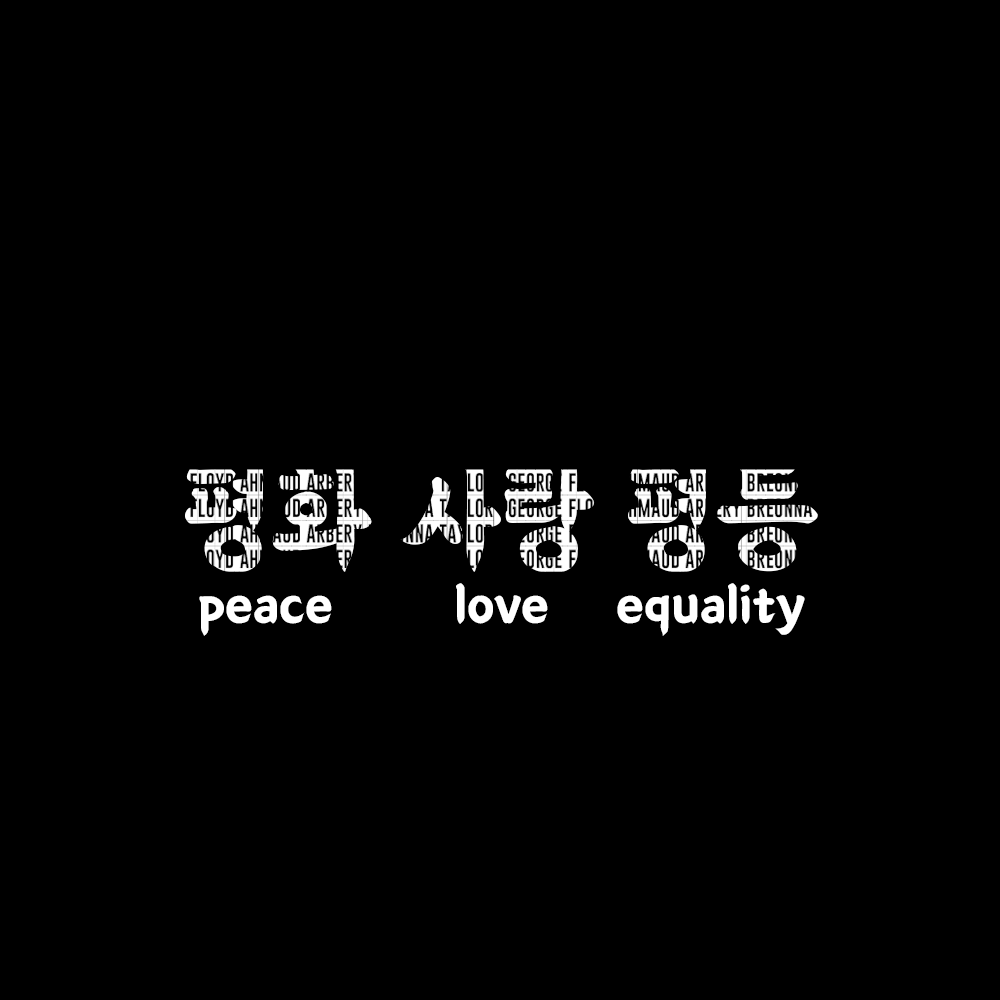
<style>
.page{position:relative;width:1000px;height:1000px;background:#000000}
.page>*{position:absolute;margin:0}
.t1{font:130.9px "BMEULJIROTTF";scale:0.86 1}
.t2{font:12px "BMEULJIROTTF";color:#ffffff}
</style>
<div class="page">
<p class="t1" style="left:184px;top:452px;width:634px;height:122px">평화 사랑 평등</p>
<p class="t2" style="left:199px;top:583px;width:606px;height:53px;text-align:center">peace         love     equality</p>
</div>
